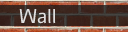
<style>
.page{position:relative;width:128px;height:32px}
.page>*{position:absolute;margin:0}
.t1{font:20px "Alef-Regular";color:#dedede}
</style>
<div class="page">
<p class="t1" style="left:19px;top:8px;width:37px;height:16px">Wall</p>
</div>
